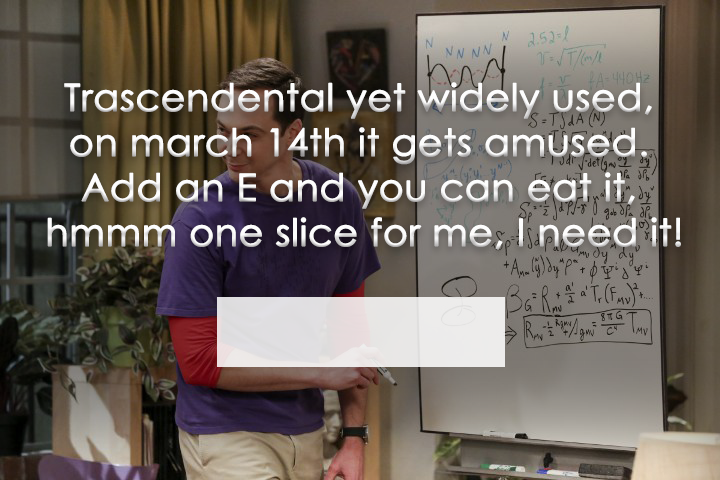
<style>
.page{position:relative;width:720px;height:480px}
.page>*{position:absolute;margin:0}
.t1{font:37.5px "CenturyGothic";color:#fdfdfd;font-weight:bold}
</style>
<div class="page">
<p class="t1" style="left:47px;top:82px;width:634px;height:168px;text-align:center">Trascendental yet widely used, <br>on march 14th it gets amused. <br>Add an E and you can eat it, <br>hmmm one slice for me, I need it!</p>
</div>
